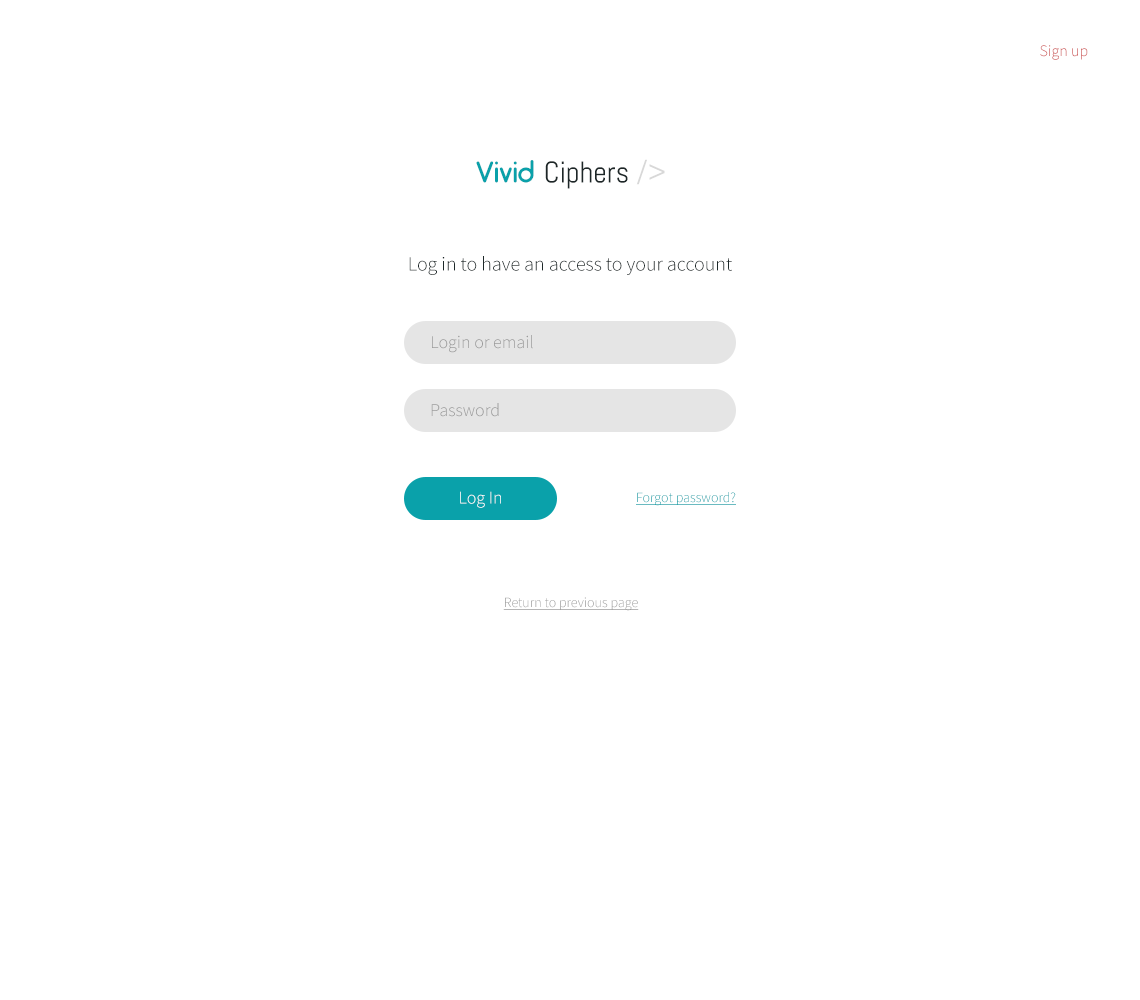
<style>
.page{position:relative;width:1140px;height:1000px;background:#ffffff}
.page>*{position:absolute;margin:0}
.t1{font:16px "SourceSansPro-Light"}
.t2{font:30px "Abel-Regular";color:#1d2728}
.t3{font:30px "Arciform";color:#0aa1aa}
.t4{font:30px "Abel-Regular";color:#d8d8d8}
.t5{font:20px "SourceSansPro-Light";color:#1d2829}
.t6{font:18px "SourceSansPro-Light";color:#9a9a9a}
.t7{font:18px "SourceSansPro-Light";color:#ffffff}
.t8{font:14px "SourceSansPro-Light";text-decoration:underline}
.t9{font:14px "SourceSansPro-Light";color:#9a9a9a;text-decoration:underline}
</style>
<div class="page">
<p class="t1" style="left:1040px;top:45px;width:48px;height:15px">Sign up</p>
<p class="t2" style="left:476px;top:159px;width:189px;height:30px"><span class="t3">Vivid </span>Ciphers <span class="t4">/&gt;</span></p>
<p class="t5" style="left:409px;top:256px;width:323px;height:19px">Log in to have an access to your account</p>
<p class="t6" style="left:432px;top:335px;width:101px;height:18px">Login or email</p>
<p class="t6" style="left:431px;top:403px;width:68px;height:14px">Password</p>
<p class="t7" style="left:460px;top:491px;width:41px;height:17px">Log In</p>
<p class="t8" style="left:636px;top:492px;width:100px;height:14px">Forgot password?</p>
<p class="t9" style="left:503px;top:597px;width:136px;height:14px">Return to previous page</p>
</div>
